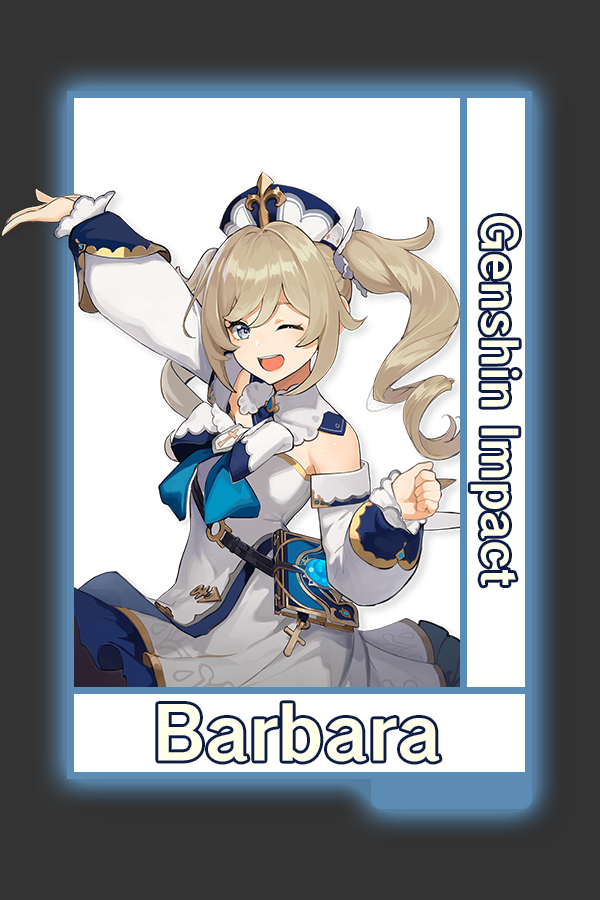
<style>
.page{position:relative;width:600px;height:900px;background:#ffffff}
.page>*{position:absolute;margin:0}
.t1{font:48.8px "HYWenHei-HEW";color:#fefef4}
.t2{font:75px "HYWenHei-HEW";color:#fefef4}
</style>
<div class="page">
<p class="t1" style="left:470px;top:216px;width:50px;height:370px;rotate:90deg">Genshin Impact</p>
<p class="t2" style="left:158px;top:703px;width:282px;height:59px">Barbara</p>
</div>
